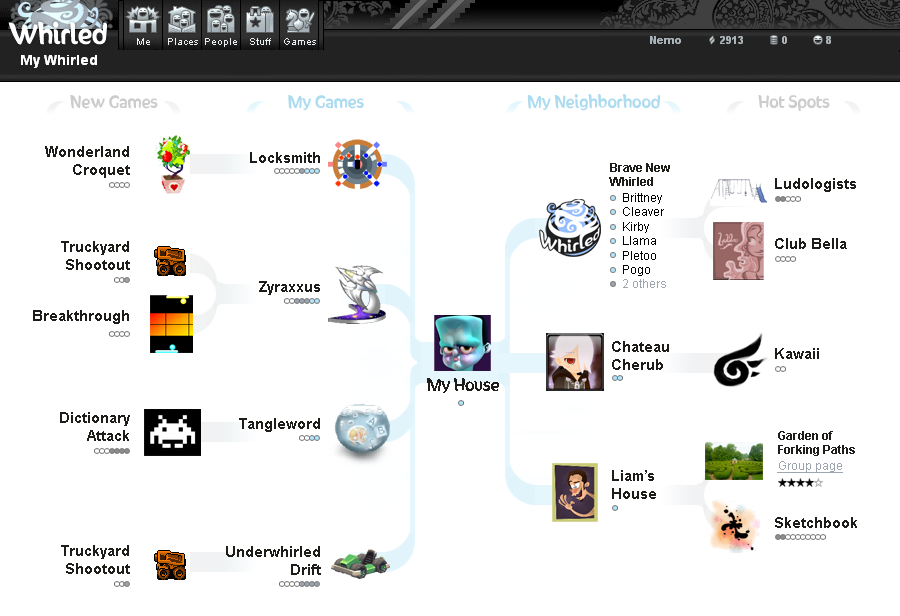
<style>
.page{position:relative;width:900px;height:616px;background:#ffffff}
.page>*{position:absolute;margin:0}
.t1{font:15px "SunnySide";color:#cccccc}
.t2{font:15px "SunnySide";color:#addbef}
.t3{font:15px "Arial-BoldMT";color:#1e1d1a}
.t4{font:12px "Arial-BoldMT";color:#1e1d1a}
.t5{font:12px "ArialMT";color:#000000}
.t6{font:12px "ArialMT";color:#9da5b0}
.t7{font:15px "SunnySide";color:#1e1d1a}
.t8{font:12px "ArialMT";color:#9da5b0;text-decoration:underline}
</style>
<div class="page">
<p class="t1" style="left:70px;top:95px;width:88px;height:14px">New Games</p>
<p class="t2" style="left:288px;top:95px;width:76px;height:15px">My Games</p>
<p class="t2" style="left:527px;top:94px;width:134px;height:17px">My Neighborhood</p>
<p class="t1" style="left:758px;top:95px;width:72px;height:16px">Hot Spots</p>
<p class="t3" style="left:45px;top:146px;width:85px;height:32px;text-align:right">Wonderland<br>Croquet</p>
<p class="t3" style="left:250px;top:152px;width:70px;height:11px">Locksmith</p>
<p class="t4" style="left:609px;top:163px;width:61px;height:23px">Brave New<br>Whirled</p>
<p class="t3" style="left:775px;top:178px;width:81px;height:14px">Ludologists</p>
<p class="t5" style="left:623px;top:193px;width:43px;height:95px">Brittney<br>Cleaver<br>Kirby<br>Llama<br>Pletoo<br>Pogo<br><span class="t6">2 others</span></p>
<p class="t3" style="left:61px;top:241px;width:69px;height:29px;text-align:right">Truckyard<br>Shootout</p>
<p class="t3" style="left:775px;top:238px;width:72px;height:11px">Club Bella</p>
<p class="t3" style="left:259px;top:281px;width:61px;height:14px">Zyraxxus</p>
<p class="t3" style="left:33px;top:310px;width:96px;height:14px">Breakthrough</p>
<p class="t3" style="left:612px;top:341px;width:57px;height:29px">Chateau <br>Cherub</p>
<p class="t3" style="left:775px;top:348px;width:44px;height:11px">Kawaii</p>
<p class="t7" style="left:427px;top:378px;width:72px;height:15px">My House</p>
<p class="t3" style="left:60px;top:412px;width:70px;height:29px;text-align:right">Dictionary<br>Attack</p>
<p class="t3" style="left:239px;top:418px;width:81px;height:14px">Tangleword</p>
<p class="t4" style="left:778px;top:431px;width:77px;height:25px">Garden of<br>Forking Paths</p>
<p class="t8" style="left:777px;top:461px;width:66px;height:12px">Group page</p>
<p class="t3" style="left:612px;top:470px;width:44px;height:29px">Liam’s <br>House</p>
<p class="t3" style="left:775px;top:517px;width:82px;height:11px">Sketchbook</p>
<p class="t3" style="left:61px;top:545px;width:69px;height:29px;text-align:right">Truckyard<br>Shootout</p>
<p class="t3" style="left:226px;top:546px;width:95px;height:29px;text-align:right">Underwhirled<br>Drift</p>
</div>
